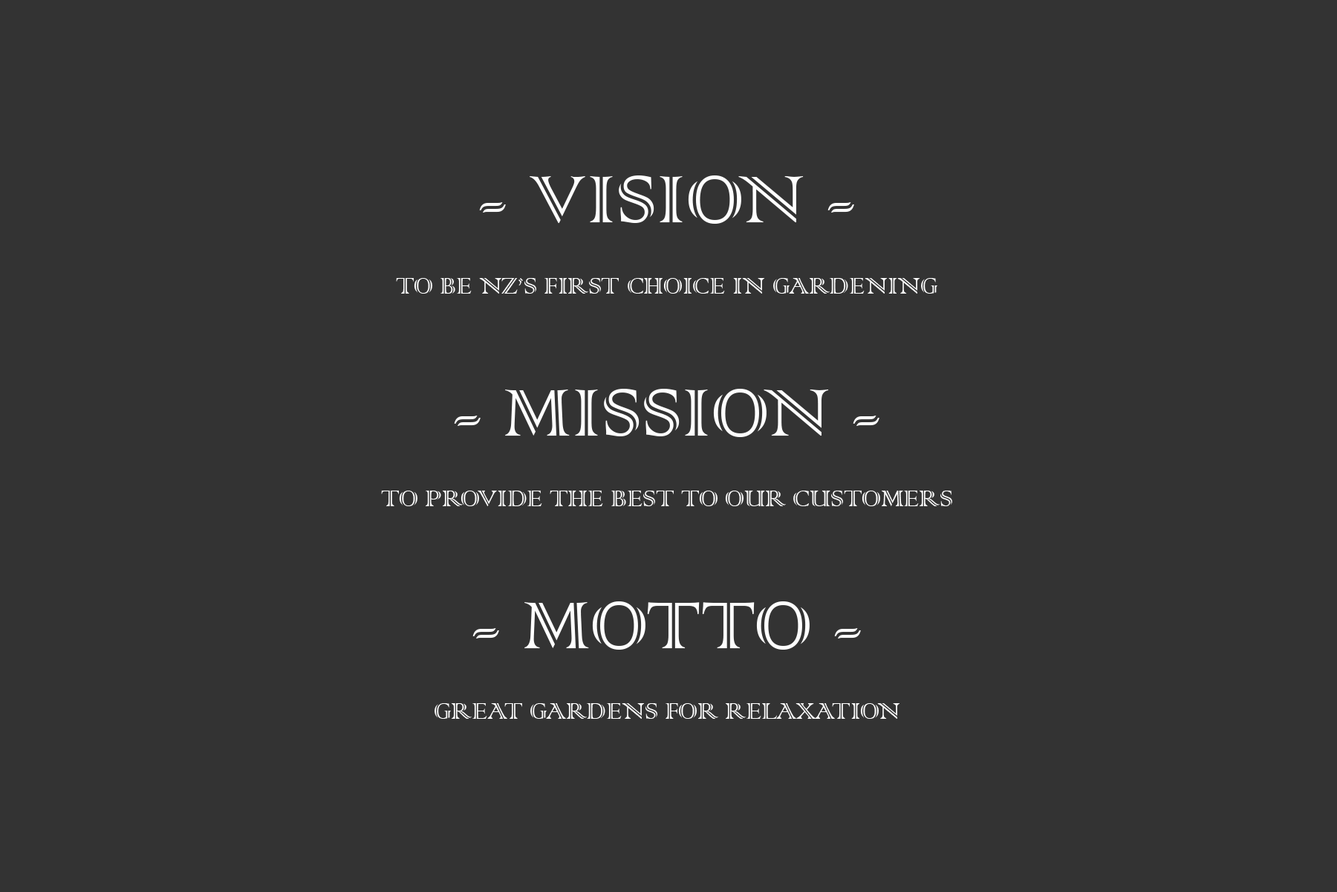
<style>
.page{position:relative;width:1337px;height:892px;background:#333333}
.page>*{position:absolute;margin:0}
.t1{font:29.5px "ColonnaMT";color:#fefefe}
.t2{font:88.6px "ColonnaMT";color:#fefefe}
</style>
<div class="page">
<p class="t1" style="left:381px;top:175px;width:572px;height:543px;text-align:center"><span class="t2">- VISION -<br></span><br>TO BE NZ’S FIRST CHOICE IN GARDENING<br><br><span class="t2">- MISSION -<br></span><br>TO PROVIDE THE BEST TO OUR CUSTOMERS<br><br><span class="t2">- MOTTO -<br></span><br>GREAT GARDENS FOR RELAXATION</p>
</div>
